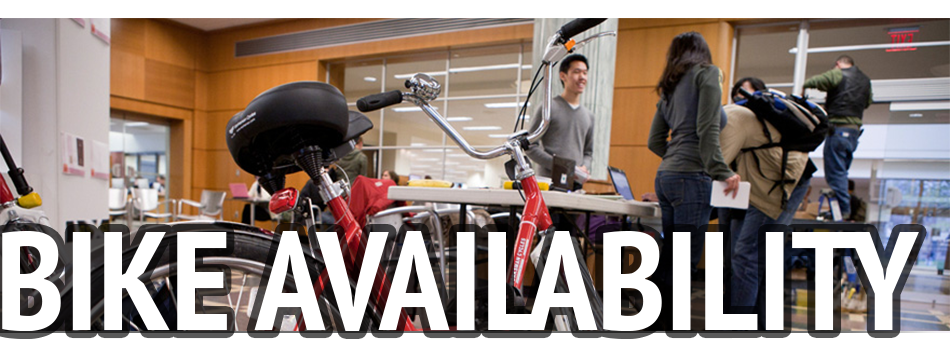
<style>
.page{position:relative;width:950px;height:350px;background:#ffffff}
.page>*{position:absolute;margin:0}
.t1{font:140px "PTSans-NarrowBold";color:#ffffff}
</style>
<div class="page">
<p class="t1" style="left:2px;top:231px;width:917px;height:100px">BIKE AVAILABILITY</p>
</div>
